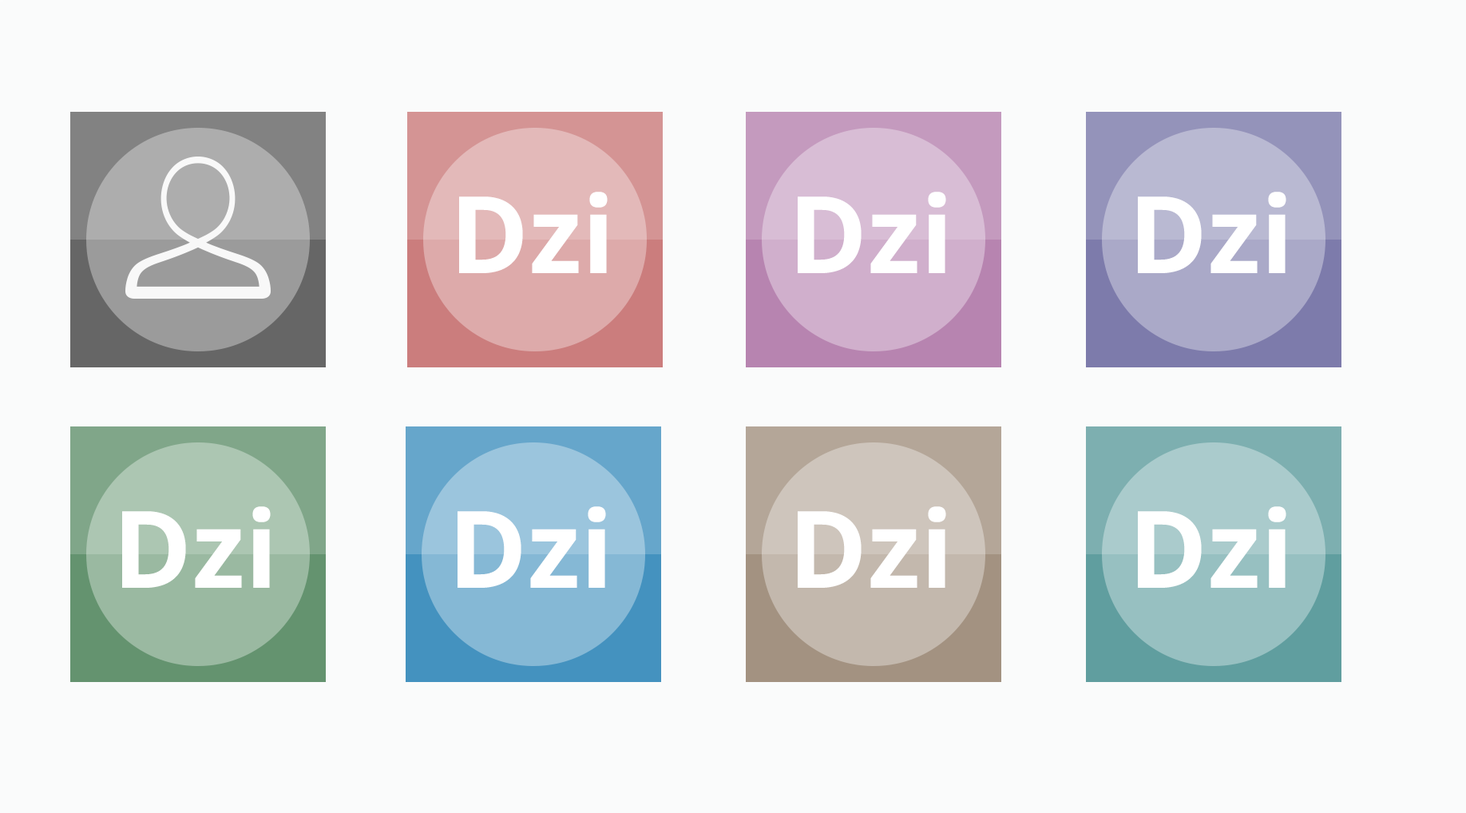
<style>
.page{position:relative;width:1466px;height:813px;background:#fafbfb}
.page>*{position:absolute;margin:0}
.t1{font:107px "OpenSans-Bold";color:#ffffff}
</style>
<div class="page">
<p class="t1" style="left:459px;top:192px;width:149px;height:81px">Dzi</p>
<p class="t1" style="left:798px;top:192px;width:149px;height:81px">Dzi</p>
<p class="t1" style="left:1138px;top:192px;width:149px;height:81px">Dzi</p>
<p class="t1" style="left:122px;top:506px;width:149px;height:82px">Dzi</p>
<p class="t1" style="left:458px;top:506px;width:148px;height:82px">Dzi</p>
<p class="t1" style="left:798px;top:506px;width:149px;height:82px">Dzi</p>
<p class="t1" style="left:1138px;top:506px;width:149px;height:82px">Dzi</p>
</div>
